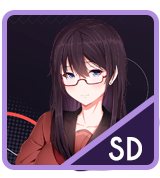
<style>
.page{position:relative;width:160px;height:178px}
.page>*{position:absolute;margin:0}
.t1{font:29.3px "CaviarDreams-Bold";letter-spacing:0.01em;color:#ffffff;font-weight:bold}
</style>
<div class="page">
<p class="t1" style="left:109px;top:136px;width:33px;height:25px">SD</p>
</div>
